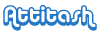
<style>
.page{position:relative;width:100px;height:35px;background:#ffffff}
.page>*{position:absolute;margin:0}
.t1{font:21.9px "AlbaSuper";color:#2478c5}
</style>
<div class="page">
<p class="t1" style="left:3px;top:5px;width:94px;height:26px">Attitash</p>
</div>
